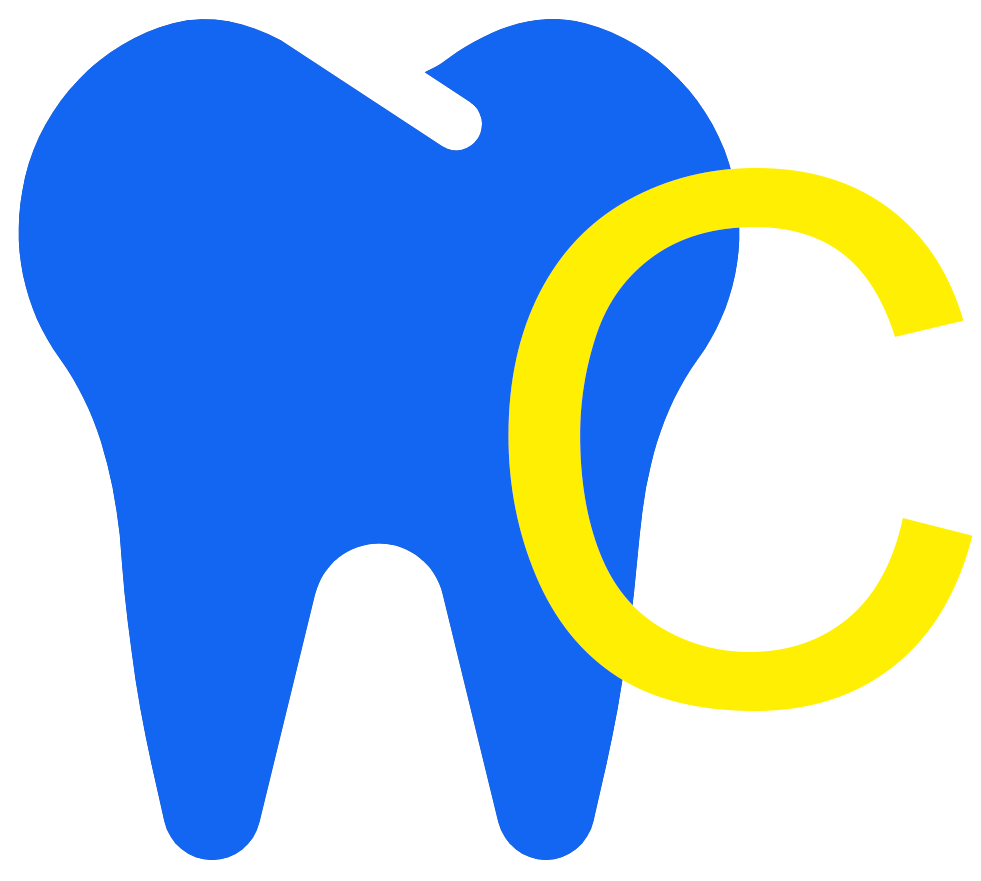
<style>
.page{position:relative;width:981px;height:881px;background:#ffffff}
.page>*{position:absolute;margin:0}
.t1{font:733.3px "ArialMT";color:#fff003}
</style>
<div class="page">
<p class="t1" style="left:508px;top:167px;width:465px;height:544px">C</p>
</div>
